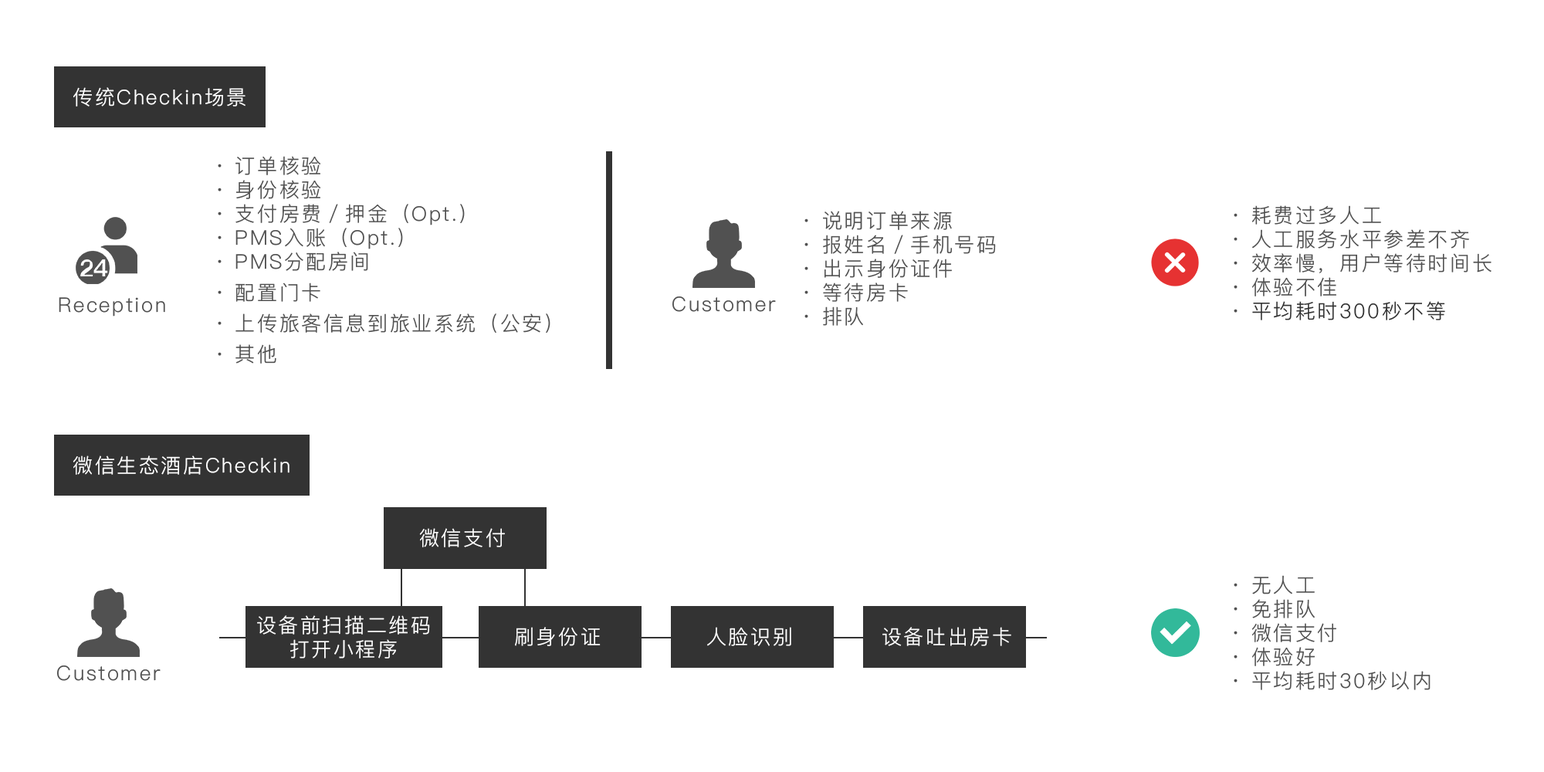
<style>
.page{position:relative;width:1544px;height:772px;background:#ffffff}
.page>*{position:absolute;margin:0}
.t1{font:20.1px "PingFangSC-Light";letter-spacing:0.1em;color:#ffffff}
.t2{font:20.1px/30.9px "PingFangSC-Light";letter-spacing:0.1em;color:#515151}
.t3{font:20.1px/30.9px "PingFangSC-Light";letter-spacing:0.1em;color:#333333}
.t4{font:20.1px "PingFangSC-Light";letter-spacing:0.1em;color:#515151}
.t5{font:20.1px/30.9px "PingFangSC-Light";letter-spacing:0.1em;color:#ffffff}
</style>
<div class="page">
<p class="t1" style="left:73px;top:87px;width:173px;height:20px">传统Checkin场景</p>
<p class="t2" style="left:218px;top:156px;width:333px;height:208px">· 订单核验<br>· 身份核验<br>· 支付房费／押金（Opt.）<br>· PMS入账（Opt.）<br>· PMS分配房间<br>· 配置门卡<br>· 上传旅客信息到旅业系统（公安）<br>· 其他</p>
<p class="t2" style="left:1234px;top:205px;width:258px;height:115px">· 耗费过多人工<br>· 人工服务水平参差不齐<br>· 效率慢，用户等待时间长<br>· 体验不佳<br>· <span class="t3">平均耗时300秒不等</span></p>
<p class="t2" style="left:805px;top:211px;width:191px;height:115px">· 说明订单来源<br>· 报姓名／手机号码<br>· 出示身份证件<br>· 等待房卡<br>· 排队</p>
<p class="t4" style="left:59px;top:297px;width:106px;height:20px">Reception</p>
<p class="t4" style="left:673px;top:297px;width:103px;height:15px">Customer</p>
<p class="t1" style="left:73px;top:456px;width:217px;height:19px">微信生态酒店Checkin</p>
<p class="t1" style="left:419px;top:528px;width:86px;height:19px">微信支付</p>
<p class="t2" style="left:1234px;top:575px;width:197px;height:115px">· 无人工<br>· 免排队<br>· 微信支付<br>· 体验好<br>· 平均耗时30秒以内</p>
<p class="t5" style="left:257px;top:615px;width:173px;height:44px;text-align:center">设备前扫描二维码<br>打开小程序</p>
<p class="t1" style="left:515px;top:627px;width:86px;height:19px">刷身份证</p>
<p class="t1" style="left:707px;top:627px;width:84px;height:19px">人脸识别</p>
<p class="t1" style="left:883px;top:627px;width:129px;height:19px">设备吐出房卡</p>
<p class="t4" style="left:57px;top:666px;width:104px;height:15px">Customer</p>
</div>
